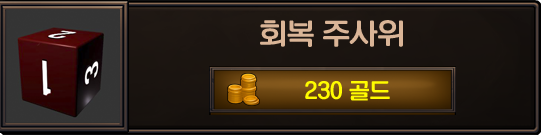
<style>
.page{position:relative;width:541px;height:135px}
.page>*{position:absolute;margin:0}
.t1{font:27.7px "KoreanNGL3-R";color:#dab597}
.t2{font:20.8px "KoreanNGL3-R";color:#fffc00}
</style>
<div class="page">
<p class="t1" style="left:260px;top:20px;width:143px;height:27px">회복 주사위</p>
<p class="t2" style="left:305px;top:81px;width:85px;height:20px">230 골드</p>
</div>
